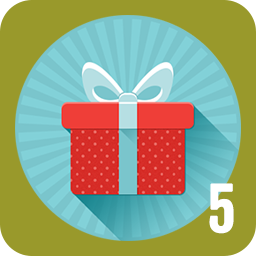
<style>
.page{position:relative;width:256px;height:256px;background:#99992b}
.page>*{position:absolute;margin:0}
.t1{font:56.9px "FjallaOne-Regular";letter-spacing:-0.03em;color:#ffffff;text-transform:uppercase;font-weight:bold}
</style>
<div class="page">
<p class="t1" style="left:209px;top:183px;width:25px;height:51px">5</p>
</div>
